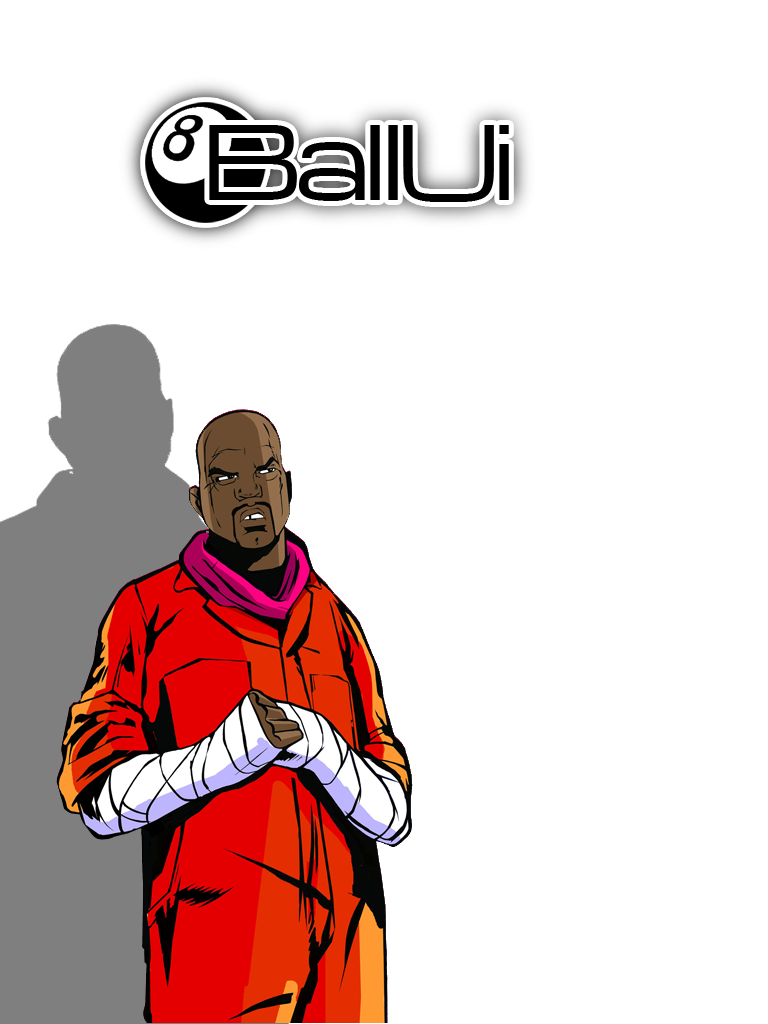
<style>
.page{position:relative;width:768px;height:1024px;background:#ffffff}
.page>*{position:absolute;margin:0}
.t1{font:100px "Michroma";letter-spacing:-0.1em;color:#000000}
</style>
<div class="page">
<p class="t1" style="left:209px;top:125px;width:300px;height:77px">BallUi</p>
</div>
